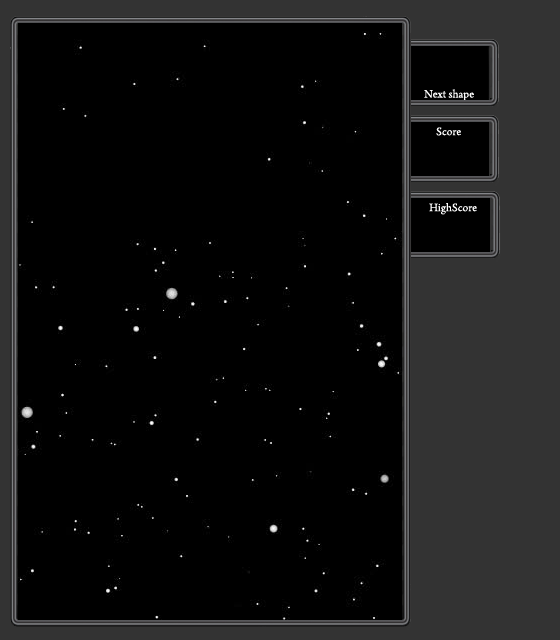
<style>
.page{position:relative;width:560px;height:640px;background:#000000}
.page>*{position:absolute;margin:0}
.t1{font:12px "ArnoPro-Regular";color:#ffffff}
</style>
<div class="page">
<p class="t1" style="left:424px;top:89px;width:50px;height:12px">Next shape</p>
<p class="t1" style="left:436px;top:127px;width:25px;height:9px">Score</p>
<p class="t1" style="left:429px;top:203px;width:48px;height:12px">HighScore</p>
</div>
